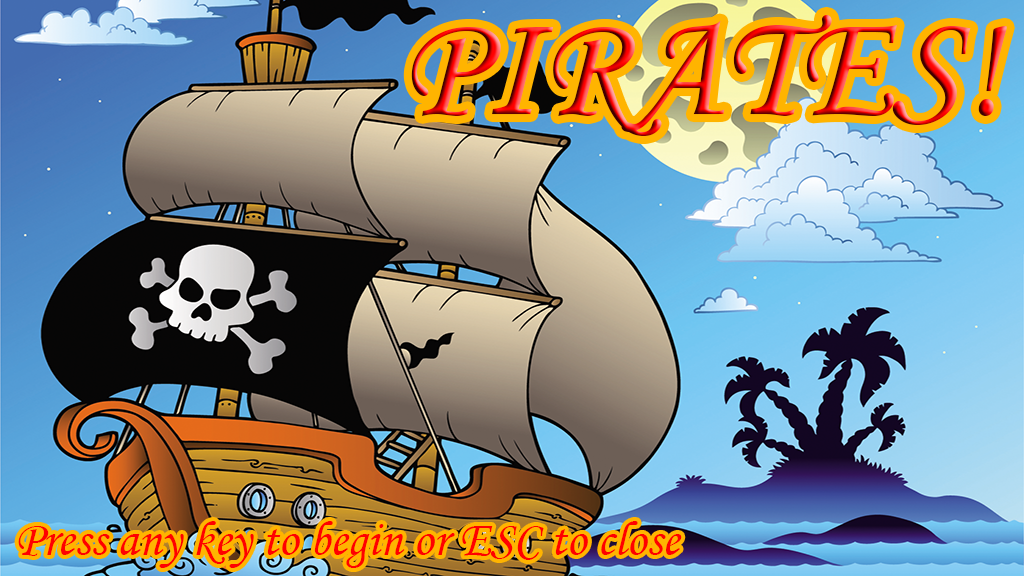
<style>
.page{position:relative;width:1024px;height:576px}
.page>*{position:absolute;margin:0}
.t1{font:150px "MonotypeCorsiva"}
.t2{font:50px "MonotypeCorsiva";color:#ff0000}
</style>
<div class="page">
<p class="t1" style="left:411px;top:15px;width:596px;height:121px">PIRATES!</p>
<p class="t2" style="left:18px;top:521px;width:664px;height:47px">Press any key to begin or ESC to close</p>
</div>
